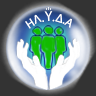
<style>
.page{position:relative;width:96px;height:96px;background:#333333}
.page>*{position:absolute;margin:0}
.t1{font:12px "MyriadPro-Regular";color:#fefefe}
.t2{font:14px "MyriadPro-Regular";color:#fefefe}
</style>
<div class="page">
<p class="t1" style="left:25px;top:11px;width:47px;height:18px;rotate:2deg">ΗΛ.<span class="t2">Y</span>.Δ.Α</p>
</div>
